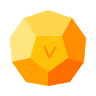
<style>
.page{position:relative;width:96px;height:96px;background:#ffffff}
.page>*{position:absolute;margin:0}
.t1{font:24px "HappyZcool-2016";color:#ff8f00}
</style>
<div class="page">
<p class="t1" style="left:43px;top:46px;width:14px;height:13px;rotate:-6deg">v</p>
</div>
